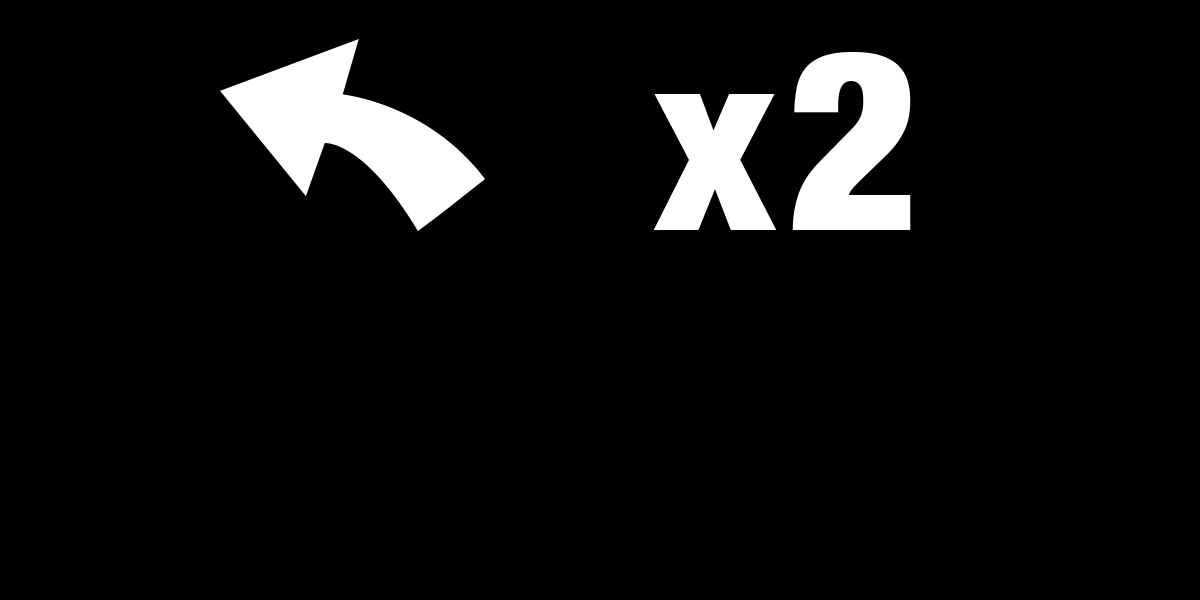
<style>
.page{position:relative;width:1200px;height:600px;background:#000000}
.page>*{position:absolute;margin:0}
.t1{font:252.3px "HelveticaNeue-CondensedBlack";letter-spacing:0.05em;color:#ffffff}
</style>
<div class="page">
<p class="t1" style="left:653px;top:52px;width:258px;height:178px">x2</p>
</div>
